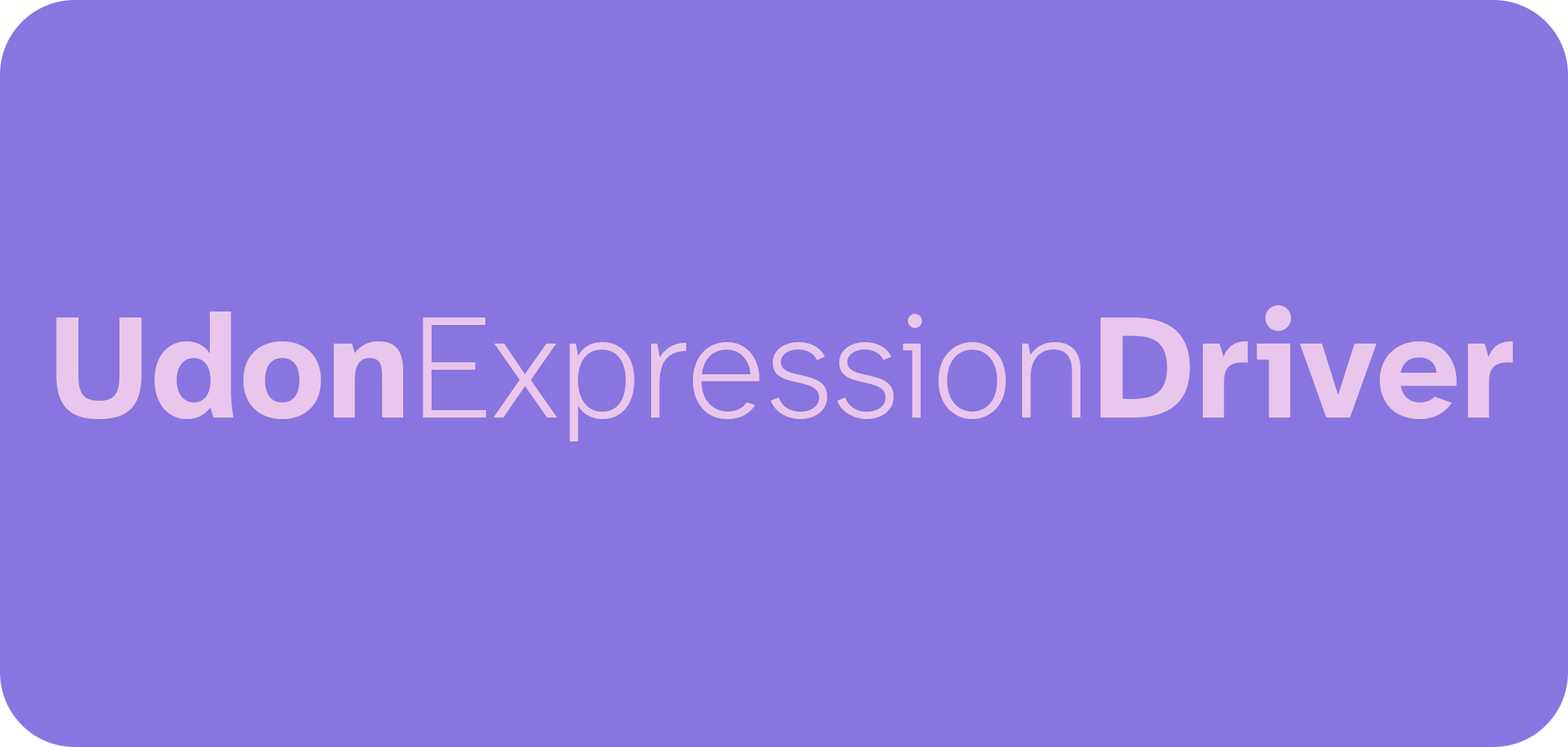
<style>
.page{position:relative;width:1568px;height:747px;background:#8975df}
.page>*{position:absolute;margin:0}
.t1{font:149.3px "AtkinsonHyperlegibleNext-ExtraLight";color:#e9c7ec}
.t2{font:149.3px "AtkinsonHyperlegibleNext-Bold";color:#e9c7ec}
</style>
<div class="page">
<p class="t1" style="left:56px;top:305px;width:1457px;height:136px"><span class="t2">Udon</span>Expression<span class="t2">Driver</span></p>
</div>
